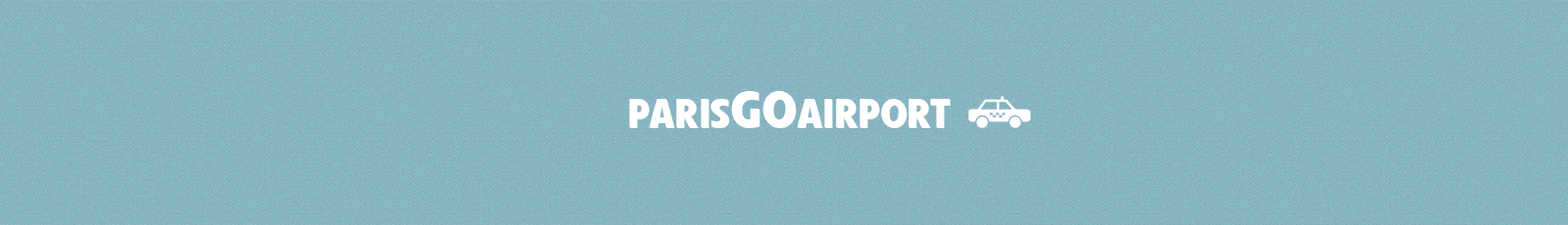
<style>
.page{position:relative;width:1568px;height:225px}
.page>*{position:absolute;margin:0}
.t1{font:39.2px "EvoBQ-Bold";color:#ffffff}
.t2{font:51px "EvoBQ-Bold";color:#ffffff}
</style>
<div class="page">
<p class="t1" style="left:629px;top:91px;width:321px;height:36px">PARIS<span class="t2">GO</span>AIRPORT</p>
</div>
